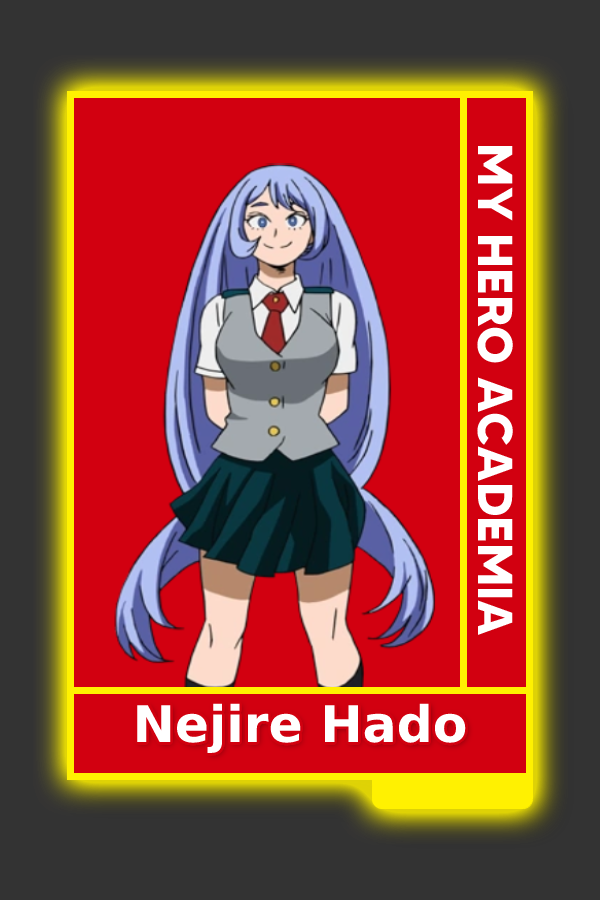
<style>
.page{position:relative;width:600px;height:900px;background:#d20010}
.page>*{position:absolute;margin:0}
.t1{font:48.8px "MADETOMMY-Bold";color:#ffffff}
.t2{font:50.5px "MADETOMMY-Bold";color:#ffffff}
</style>
<div class="page">
<p class="t1" style="left:477px;top:146px;width:36px;height:489px;rotate:90deg">MY HERO ACADEMIA</p>
<p class="t2" style="left:137px;top:703px;width:329px;height:50px">Nejire Hado</p>
</div>
